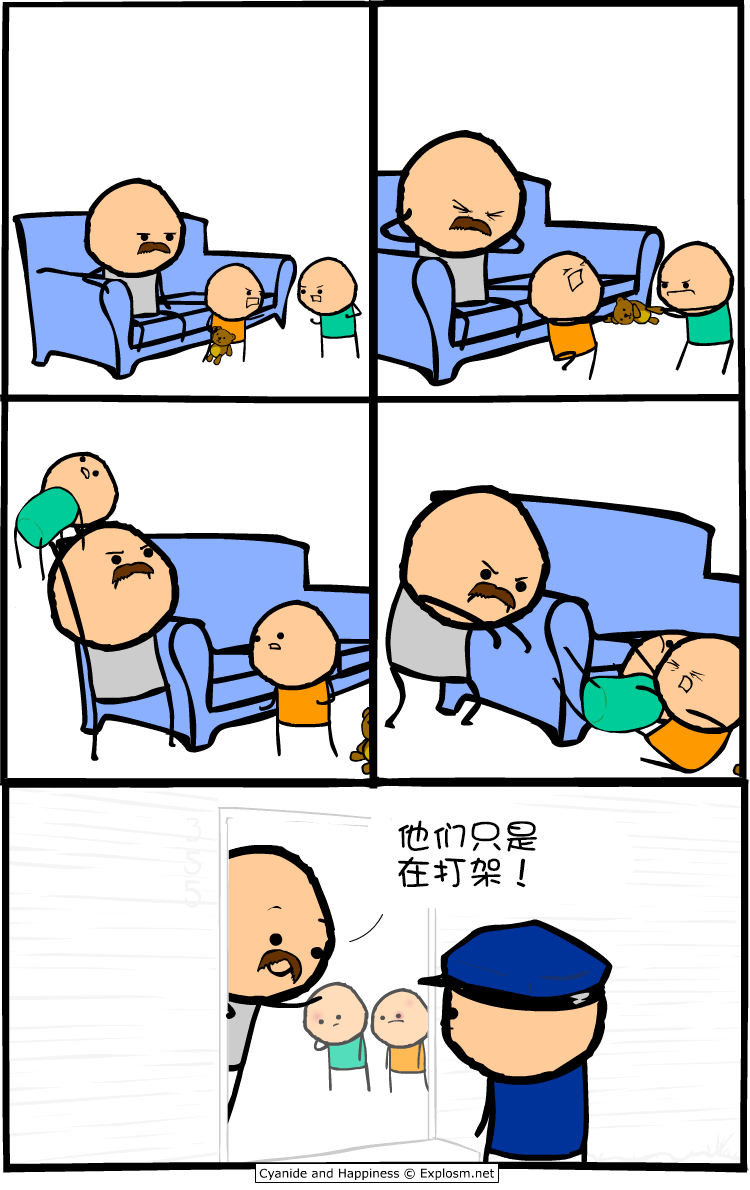
<style>
.page{position:relative;width:750px;height:1190px;background:#ffffff}
.page>*{position:absolute;margin:0}
.t1{font:36px/36px "DFGirl";color:#000000}
</style>
<div class="page">
<p class="t1" style="left:398px;top:820px;width:140px;height:68px">他们只是<br>在打架！</p>
</div>
